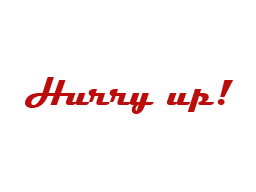
<style>
.page{position:relative;width:256px;height:192px;background:#ffffff}
.page>*{position:absolute;margin:0}
.t1{font:36px "Magneto-Bold";color:#bc0d0d}
</style>
<div class="page">
<p class="t1" style="left:25px;top:77px;width:208px;height:37px">Hurry up!</p>
</div>
